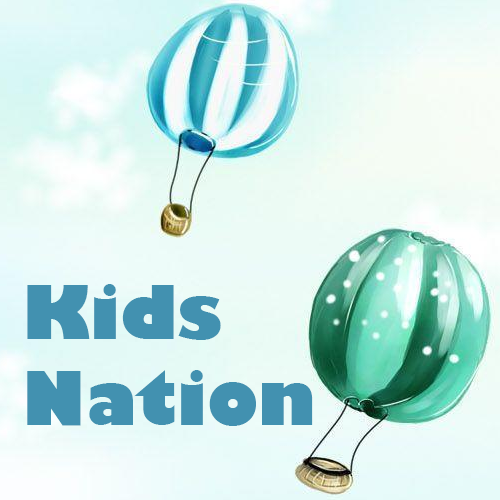
<style>
.page{position:relative;width:500px;height:500px}
.page>*{position:absolute;margin:0}
.t1{font:72px "GillSans-UltraBold";color:#4291b0}
</style>
<div class="page">
<p class="t1" style="left:27px;top:284px;width:286px;height:142px">Kids<br>Nation</p>
</div>
